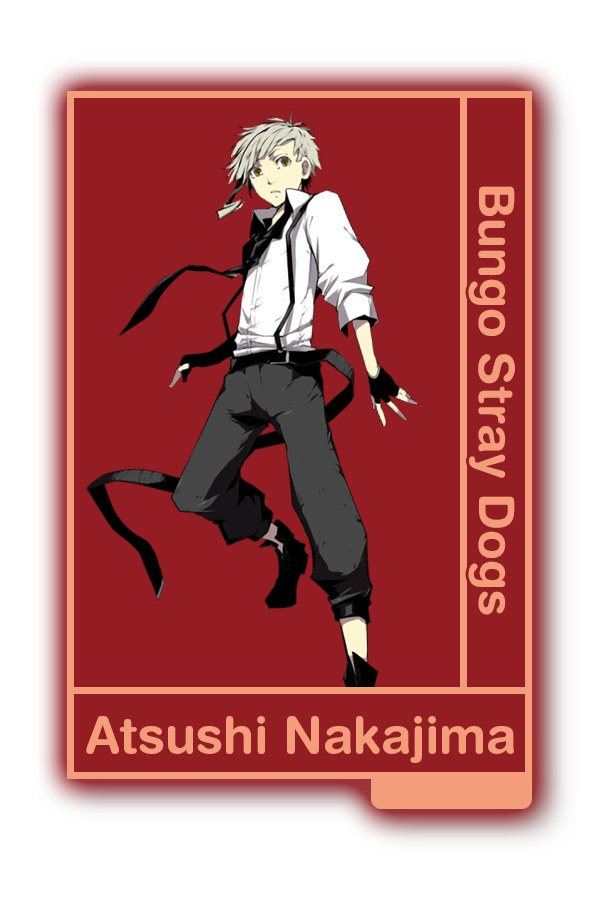
<style>
.page{position:relative;width:600px;height:900px;background:#941d23}
.page>*{position:absolute;margin:0}
.t1{font:48.8px "HelveticaRounded-Bold";color:#f39d7b}
.t2{font:50.5px "HelveticaRounded-Bold";color:#f39d7b}
</style>
<div class="page">
<p class="t1" style="left:468px;top:186px;width:47px;height:429px;rotate:90deg">Bungo Stray Dogs</p>
<p class="t2" style="left:86px;top:716px;width:428px;height:47px">Atsushi Nakajima</p>
</div>
